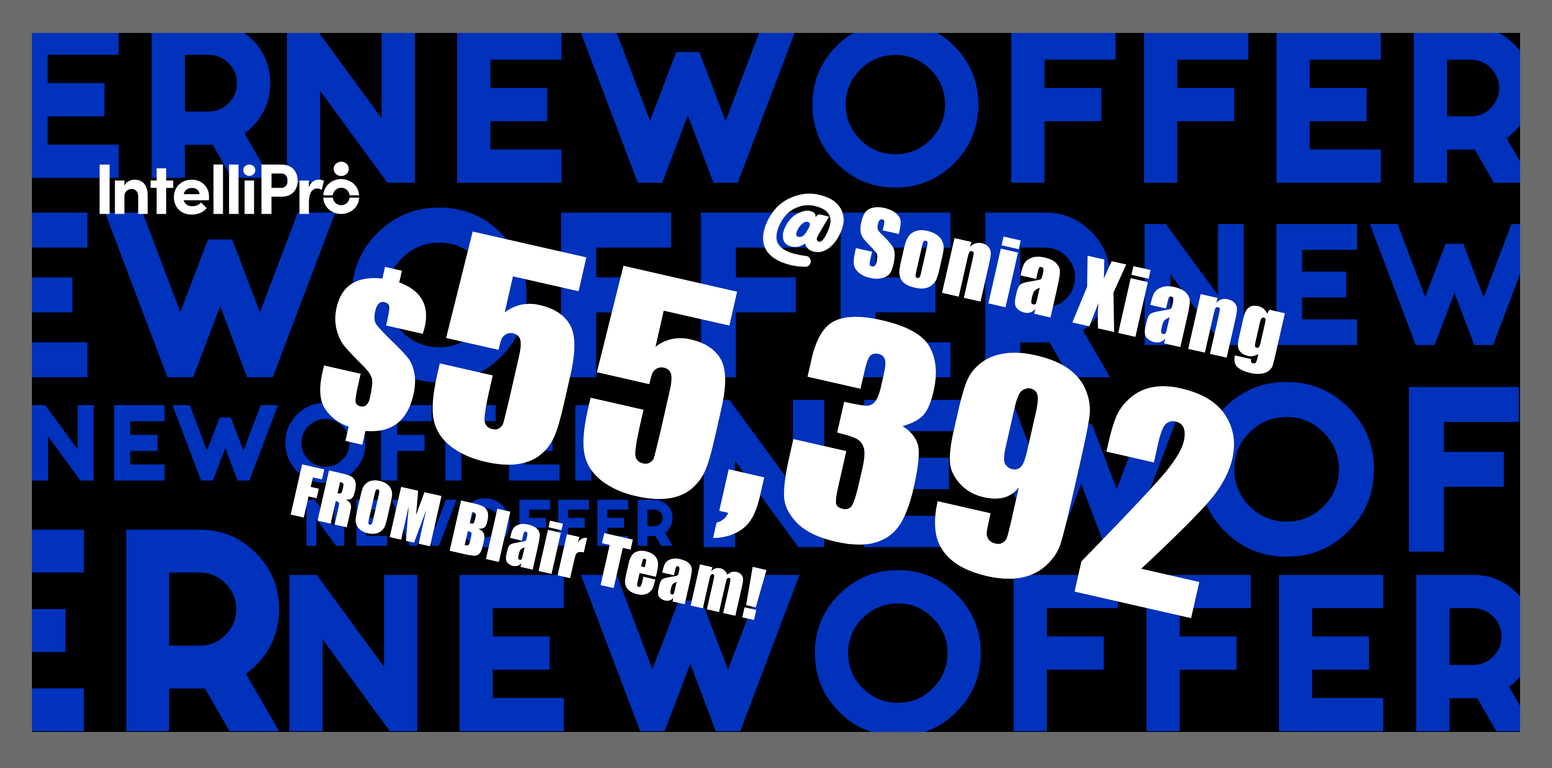
<style>
.page{position:relative;width:1552px;height:768px;background:#000000}
.page>*{position:absolute;margin:0}
.t1{font:86.7px "Impact";letter-spacing:0.025em;color:#ffffff}
.t2{font:86.7px "AdobeHeitiStd-Regular";letter-spacing:0.025em;color:#ffffff}
.t3{font:275.4px "Impact";letter-spacing:0.025em;color:#ffffff;text-transform:uppercase}
.t4{font:190.7px "Impact";letter-spacing:0.025em;color:#ffffff;text-transform:uppercase}
.t5{font:65.2px "Impact";letter-spacing:0.025em;color:#ffffff}
</style>
<div class="page">
<p class="t1" style="left:853px;top:206px;width:432px;height:169px;rotate:13deg"><span class="t2">     </span>Sonia Xiang</p>
<p class="t3" style="left:317px;top:231px;width:921px;height:387px;rotate:13deg"><span class="t4">$</span>55,392</p>
<p class="t5" style="left:291px;top:464px;width:476px;height:156px;rotate:13deg">FROM Blair Team!</p>
</div>
